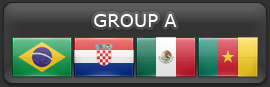
<style>
.page{position:relative;width:270px;height:87px}
.page>*{position:absolute;margin:0}
.t1{font:18px "Verdana";color:#ffffff}
</style>
<div class="page">
<p class="t1" style="left:94px;top:14px;width:83px;height:13px">GROUP A</p>
</div>
